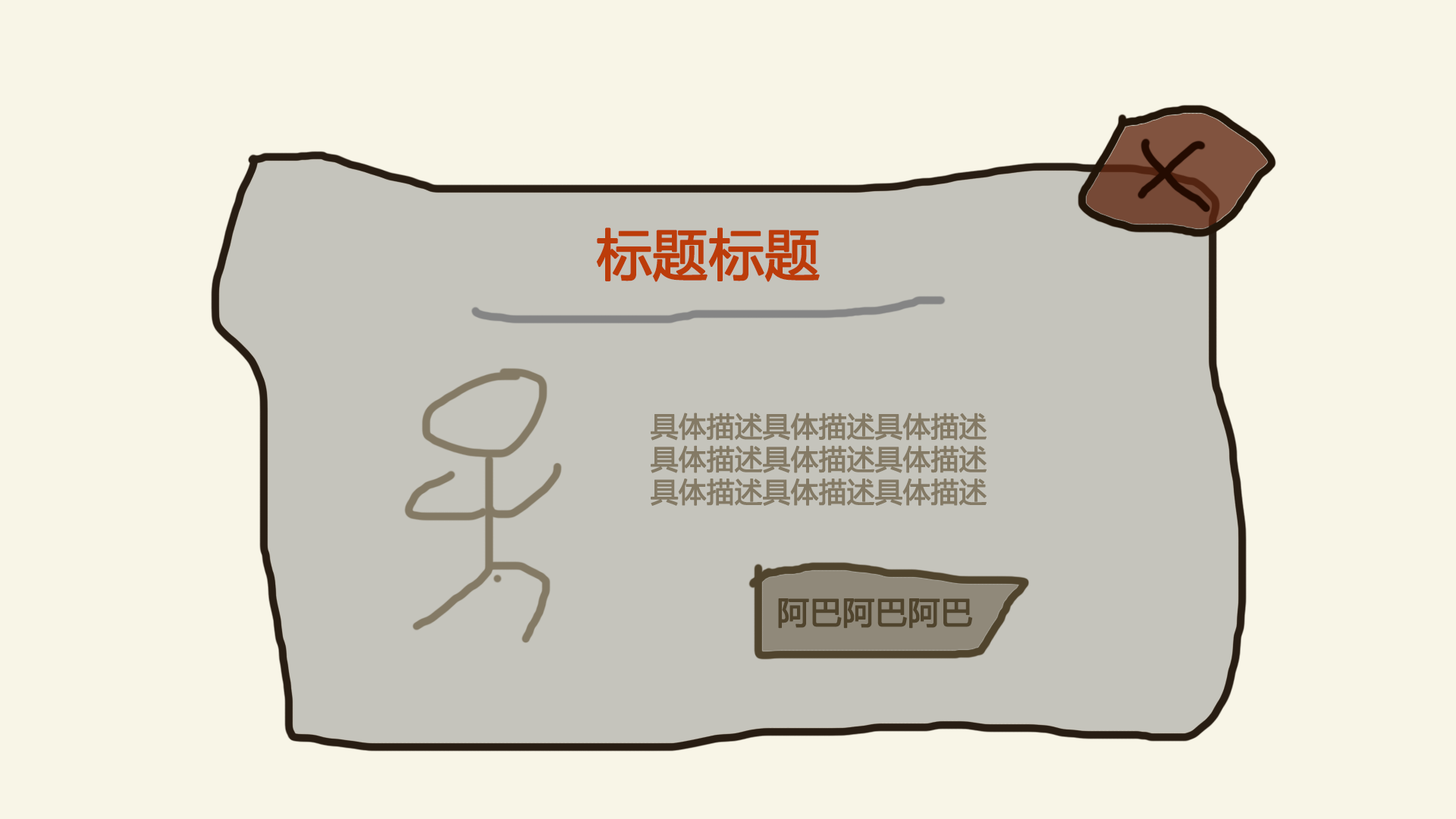
<style>
.page{position:relative;width:1456px;height:819px;background:#f8f5e7}
.page>*{position:absolute;margin:0}
.t1{font:54.6px "MicrosoftYaHei";color:#bc3c0a;font-weight:bold}
.t2{font:27.3px "MicrosoftYaHei";color:#847a65;font-weight:bold}
.t3{font:31.8px "MicrosoftYaHei";color:#50442d;font-weight:bold}
</style>
<div class="page">
<p class="t1" style="left:596px;top:227px;width:224px;height:55px">标题标题</p>
<p class="t2" style="left:651px;top:413px;width:336px;height:93px;text-align:center">具体描述具体描述具体描述<br>具体描述具体描述具体描述<br>具体描述具体描述具体描述</p>
<p class="t3" style="left:778px;top:598px;width:195px;height:31px">阿巴阿巴阿巴</p>
</div>
